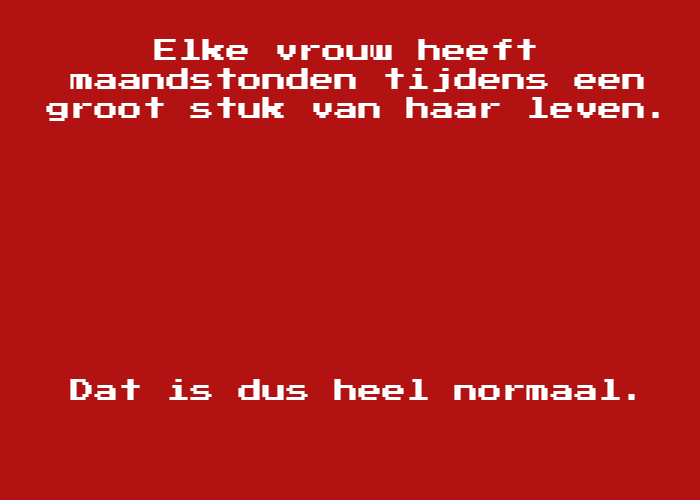
<style>
.page{position:relative;width:700px;height:500px;background:#b21212}
.page>*{position:absolute;margin:0}
.t1{font:24px "PressStart2P";color:#ffffff}
</style>
<div class="page">
<p class="t1" style="left:46px;top:39px;width:613px;height:82px;text-align:center">Elke vrouw heeft <br>maandstonden tijdens een<br>groot stuk van haar leven.</p>
<p class="t1" style="left:70px;top:379px;width:565px;height:21px">Dat is dus heel normaal.</p>
</div>
